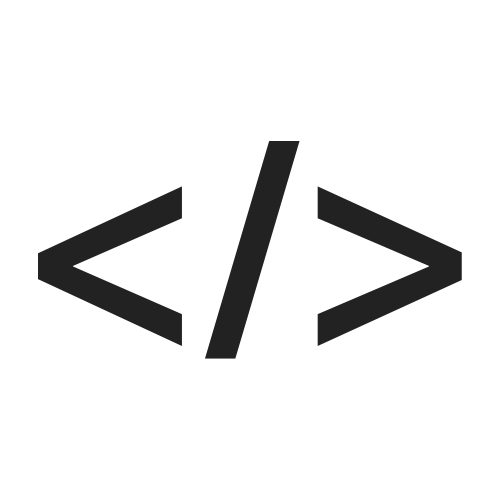
<style>
.page{position:relative;width:500px;height:500px;background:#ffffff}
.page>*{position:absolute;margin:0}
.t1{font:300px "MyriadPro-Bold";color:#222222}
</style>
<div class="page">
<p class="t1" style="left:38px;top:141px;width:424px;height:218px">&lt;/&gt;</p>
</div>
